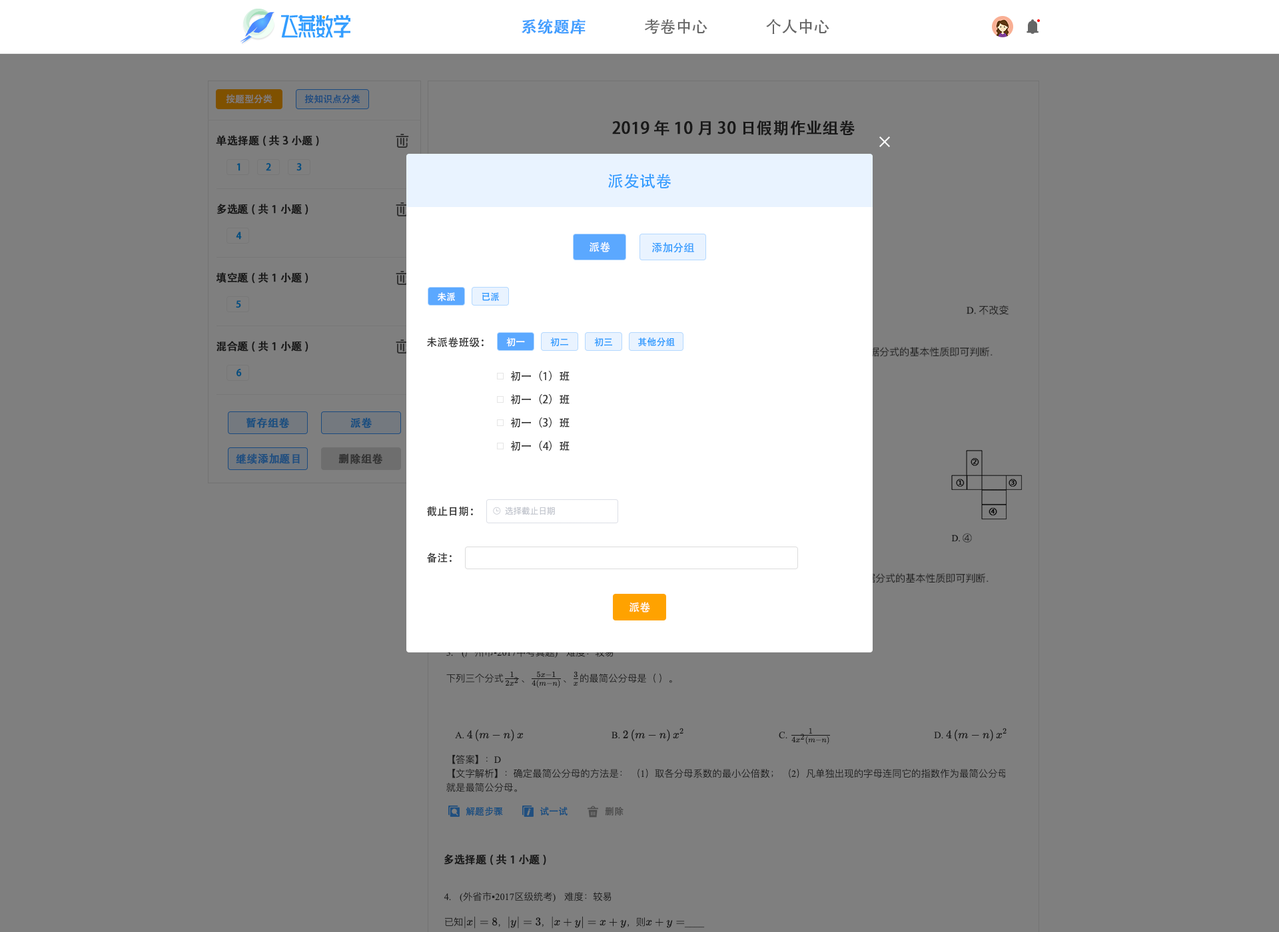
<style>
.page{position:relative;width:1279px;height:932px;background:#7f7f7f}
.page>*{position:absolute;margin:0}
.t1{font:16px "AdobeHeitiStd-Regular";color:#409eff;font-weight:bold}
.t2{font:16px "AdobeHeitiStd-Regular";color:#666666}
.t3{font:9.3px "AdobeHeitiStd-Regular";color:#7f7f7f}
.t4{font:9.3px "AdobeHeitiStd-Regular";color:#1b4a7f}
.t5{font:16px "AdobeHeitiStd-Regular";color:#191919;font-weight:bold}
.t6{font:10.7px "AdobeHeitiStd-Regular";color:#191919;font-weight:bold}
.t7{font:9.3px "AdobeHeitiStd-Regular";color:#024f7f;font-weight:bold}
.t8{font:16px "AdobeHeitiStd-Regular";color:#339dff}
.t9{font:10.7px "AdobeHeitiStd-Regular";color:#ffffff}
.t10{font:10.7px "AdobeHeitiStd-Regular";color:#339dff}
.t11{font:9.3px "AdobeHeitiStd-Regular";color:#ffffff}
.t12{font:9.3px "AdobeHeitiStd-Regular";color:#339dff}
.t13{font:10.7px "AdobeHeitiStd-Regular";color:#333333}
.t14{font:10.7px "AdobeHeitiStd-Regular";color:#194e7f;font-weight:bold}
.t15{font:10.7px "AdobeHeitiStd-Regular";color:#204f7f;font-weight:bold}
.t16{font:10.7px "AdobeHeitiStd-Regular";color:#333333;font-weight:bold}
.t17{font:9.3px "AdobeHeitiStd-Regular";color:#194e7f}
.t18{font:9.3px "AdobeHeitiStd-Regular";color:#4c4c4c}
</style>
<div class="page">
<p class="t1" style="left:522px;top:19px;width:63px;height:16px">系统题库</p>
<p class="t2" style="left:644px;top:19px;width:63px;height:15px">考卷中心</p>
<p class="t2" style="left:766px;top:19px;width:63px;height:15px">个人中心</p>
<p class="t3" style="left:226px;top:94px;width:46px;height:10px">按题型分类</p>
<p class="t4" style="left:304px;top:94px;width:56px;height:10px">按知识点分类</p>
<p class="t5" style="left:612px;top:120px;width:243px;height:16px">2019年10月30日假期作业组卷</p>
<p class="t6" style="left:216px;top:135px;width:103px;height:12px">单选择题(共3小题)</p>
<p class="t7" style="left:236px;top:163px;width:4px;height:8px">1</p>
<p class="t7" style="left:266px;top:163px;width:5px;height:8px">2</p>
<p class="t7" style="left:296px;top:163px;width:6px;height:8px">3</p>
<p class="t8" style="left:608px;top:174px;width:63px;height:14px">派发试卷</p>
<p class="t6" style="left:216px;top:204px;width:92px;height:11px">多选题(共1小题)</p>
<p class="t7" style="left:236px;top:232px;width:6px;height:8px">4</p>
<p class="t9" style="left:589px;top:242px;width:21px;height:10px">派卷</p>
<p class="t10" style="left:652px;top:242px;width:42px;height:11px">添加分组</p>
<p class="t6" style="left:216px;top:272px;width:92px;height:12px">填空题(共1小题)</p>
<p class="t11" style="left:438px;top:292px;width:17px;height:10px">未派</p>
<p class="t12" style="left:482px;top:292px;width:17px;height:10px">已派</p>
<p class="t7" style="left:236px;top:300px;width:5px;height:8px">5</p>
<p class="t6" style="left:216px;top:341px;width:92px;height:11px">混合题(共1小题)</p>
<p class="t13" style="left:427px;top:337px;width:57px;height:11px">未派卷班级：</p>
<p class="t11" style="left:506px;top:338px;width:19px;height:9px">初一</p>
<p class="t12" style="left:550px;top:338px;width:18px;height:9px">初二</p>
<p class="t12" style="left:594px;top:338px;width:18px;height:9px">初三</p>
<p class="t12" style="left:638px;top:337px;width:37px;height:10px">其他分组</p>
<p class="t7" style="left:236px;top:369px;width:6px;height:8px">6</p>
<p class="t13" style="left:511px;top:371px;width:58px;height:11px">初一（1）班</p>
<p class="t13" style="left:511px;top:394px;width:58px;height:11px">初一（2）班</p>
<p class="t14" style="left:246px;top:418px;width:44px;height:10px">暂存组卷</p>
<p class="t14" style="left:350px;top:418px;width:22px;height:10px">派卷</p>
<p class="t13" style="left:511px;top:418px;width:58px;height:10px">初一（3）班</p>
<p class="t13" style="left:511px;top:441px;width:58px;height:11px">初一（4）班</p>
<p class="t15" style="left:236px;top:454px;width:64px;height:10px">继续添加题目</p>
<p class="t16" style="left:338px;top:454px;width:45px;height:10px">删除组卷</p>
<p class="t13" style="left:427px;top:506px;width:46px;height:11px">截止日期：</p>
<p class="t13" style="left:427px;top:553px;width:25px;height:10px">备注：</p>
<p class="t9" style="left:629px;top:602px;width:21px;height:11px">派卷</p>
<p class="t17" style="left:466px;top:807px;width:37px;height:10px">解题步骤</p>
<p class="t17" style="left:540px;top:807px;width:27px;height:9px">试一试</p>
<p class="t18" style="left:605px;top:807px;width:18px;height:9px">删除</p>
<p class="t6" style="left:444px;top:855px;width:102px;height:11px">多选择题(共1小题)</p>
</div>
